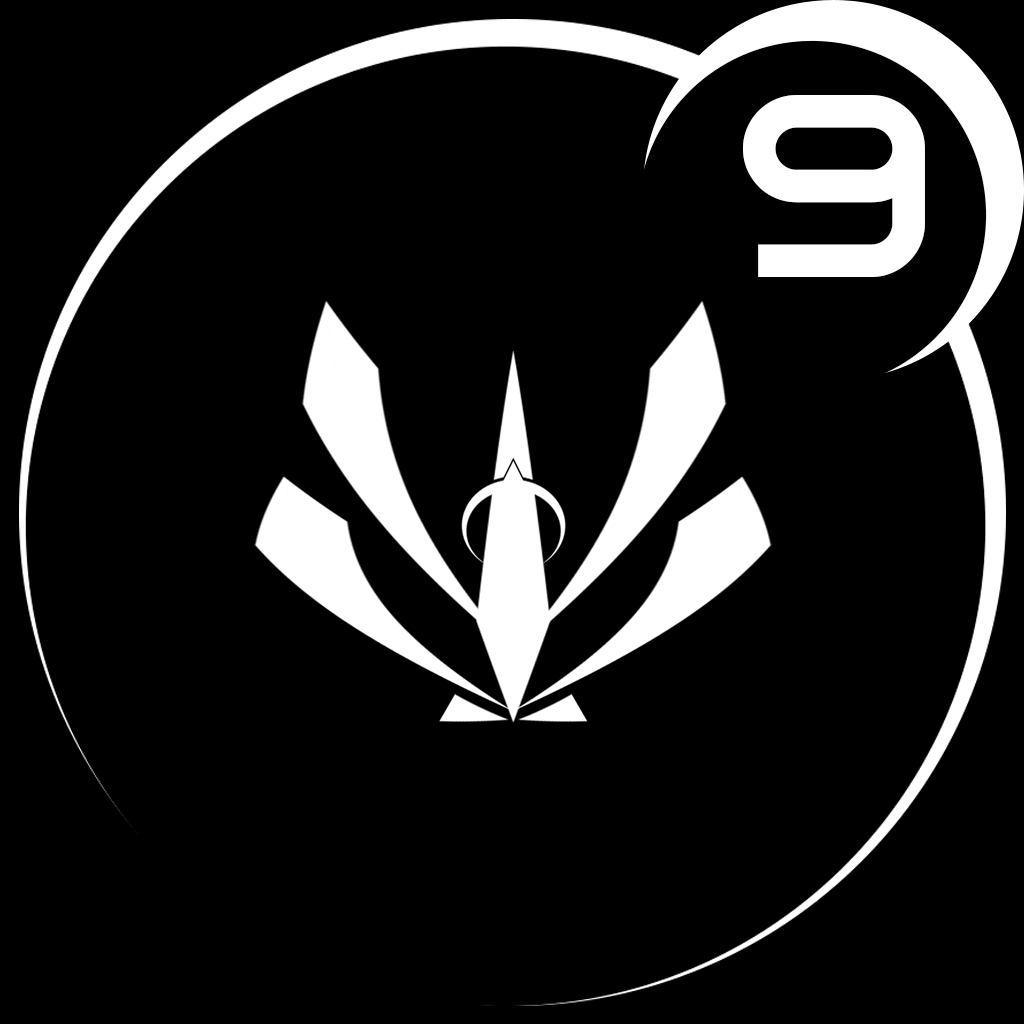
<style>
.page{position:relative;width:1024px;height:1024px;background:#000000}
.page>*{position:absolute;margin:0}
.t1{font:260px "AzonixRegular";color:#ffffff}
</style>
<div class="page">
<p class="t1" style="left:742px;top:95px;width:183px;height:182px">9</p>
</div>
